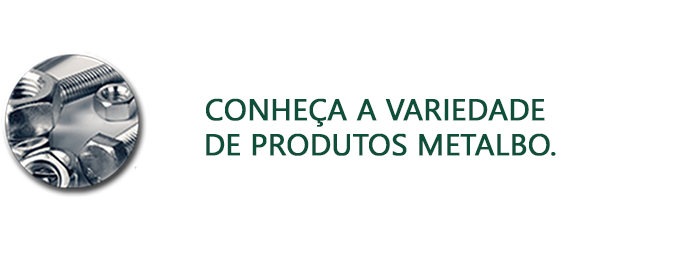
<style>
.page{position:relative;width:700px;height:263px;background:#ffffff}
.page>*{position:absolute;margin:0}
.t1{font:30px "NirmalaUI";color:#0d4f38;font-weight:bold}
</style>
<div class="page">
<p class="t1" style="left:206px;top:98px;width:339px;height:29px">CONHEÇA A VARIEDADE</p>
<p class="t1" style="left:206px;top:133px;width:350px;height:23px">DE PRODUTOS METALBO.</p>
</div>
